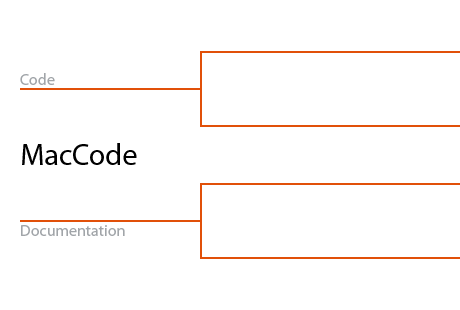
<style>
.page{position:relative;width:460px;height:310px;background:#ffffff}
.page>*{position:absolute;margin:0}
.t1{font:16px "Myriad-Roman";color:#a1a5a9}
.t2{font:30px "Myriad-Roman";color:#000000}
</style>
<div class="page">
<p class="t1" style="left:20px;top:73px;width:35px;height:12px">Code</p>
<p class="t2" style="left:22px;top:143px;width:115px;height:22px">MacCode</p>
<p class="t1" style="left:21px;top:225px;width:104px;height:11px">Documentation</p>
</div>
